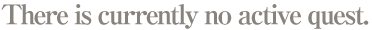
<style>
.page{position:relative;width:372px;height:30px;background:#ffffff}
.page>*{position:absolute;margin:0}
.t1{font:27px "RyuminPro-ExBold";letter-spacing:-0.08em;color:#89837d}
</style>
<div class="page">
<p class="t1" style="left:1px;top:4px;width:368px;height:25px">There is currently no active quest.</p>
</div>
